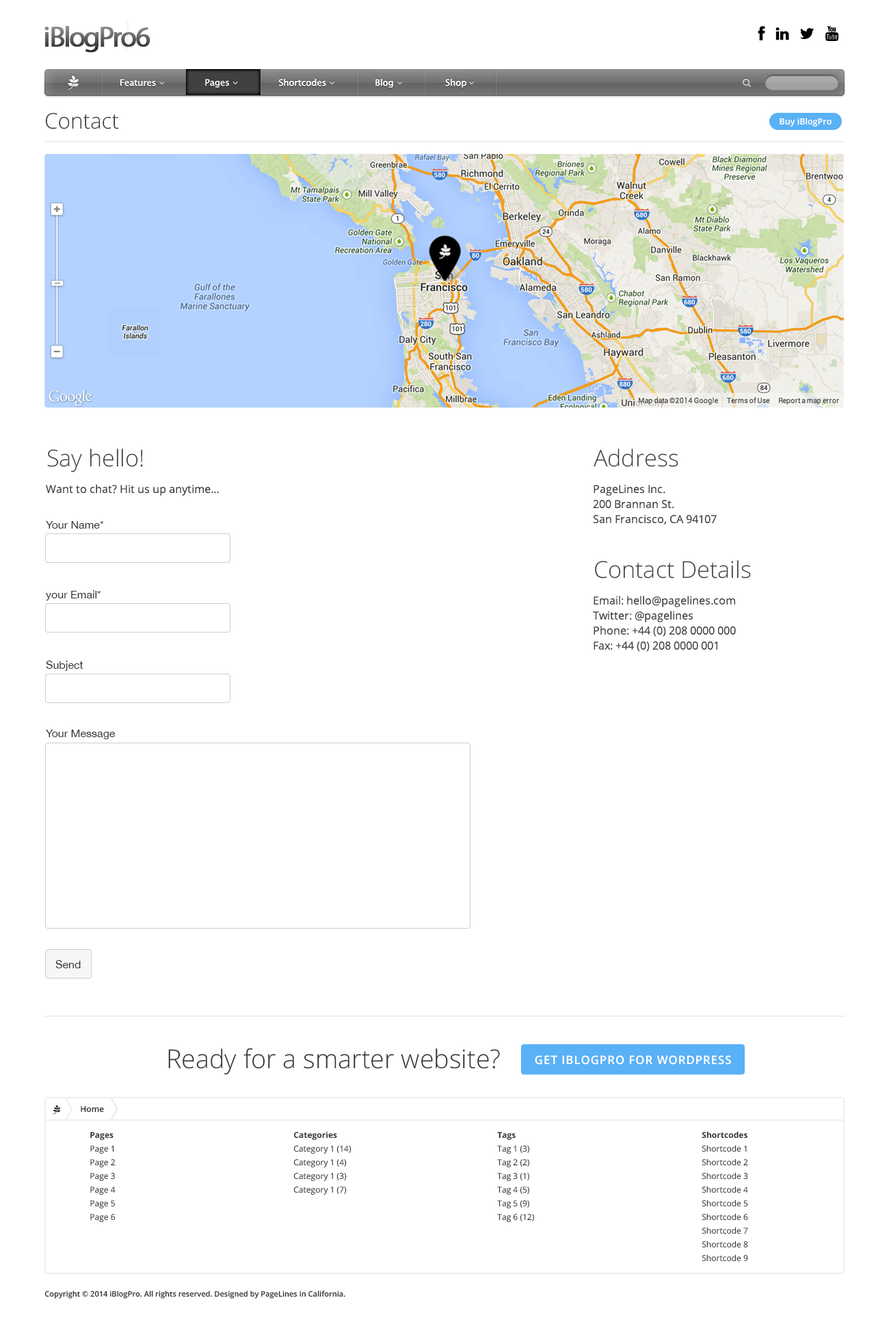
<style>
.page{position:relative;width:889px;height:1341px;background:#ffffff}
.page>*{position:absolute;margin:0}
.t1{font:28.7px "MyriadPro-Regular";letter-spacing:-0.065em;font-weight:bold}
.t2{font:8.9px "LucidaSansUnicode";color:#ffffff}
.t3{font:21.5px "OpenSans-Light";color:#333333}
.t4{font:8.6px "OpenSans-Semibold";color:#ffffff}
.t5{font:23.3px "OpenSans-Light";color:#414141}
.t6{font:10.9px "OpenSans";color:#414141}
.t7{font:10.9px/15px "OpenSans";color:#414141}
.t8{font:10.9px "HelveticaNeue";color:#333333}
.t9{font:26px "OpenSans-Light";color:#333333}
.t10{font:11.6px "OpenSans-Semibold";letter-spacing:0.06em;color:#ffffff;text-transform:uppercase}
.t11{font:8.2px "OpenSans-Semibold";color:#333333}
.t12{font:8.2px/13.7px "OpenSans";color:#333333}
.t13{font:8.2px/13.7px "OpenSans-Bold";color:#333333}
.t14{font:7.5px "OpenSans-Semibold";color:#333333}
</style>
<div class="page">
<p class="t1" style="left:44px;top:26px;width:106px;height:27px">iBlogPro6</p>
<p class="t2" style="left:120px;top:79px;width:346px;height:9px">Features         Pages         Shortcodes                Blog             Shop</p>
<p class="t2" style="left:120px;top:79px;width:346px;height:9px">Features         Pages         Shortcodes                Blog             Shop</p>
<p class="t2" style="left:205px;top:79px;width:24px;height:9px">Pages</p>
<p class="t3" style="left:45px;top:113px;width:74px;height:16px">Contact</p>
<p class="t4" style="left:780px;top:118px;width:52px;height:9px">Buy iBlogPro</p>
<p class="t5" style="left:47px;top:449px;width:96px;height:24px">Say hello!</p>
<p class="t5" style="left:594px;top:449px;width:84px;height:18px">Address</p>
<p class="t6" style="left:46px;top:484px;width:173px;height:12px">Want to chat? Hit us up anytime…</p>
<p class="t7" style="left:593px;top:485px;width:124px;height:40px">PageLines Inc.<br>200 Brannan St.<br>San Francisco, CA 94107</p>
<p class="t8" style="left:46px;top:521px;width:58px;height:8px">Your Name*</p>
<p class="t5" style="left:595px;top:560px;width:156px;height:19px">Contact Details</p>
<p class="t8" style="left:46px;top:590px;width:55px;height:10px">your Email*</p>
<p class="t7" style="left:593px;top:596px;width:143px;height:56px">Email: hello@pagelines.com<br>Twitter: @pagelines<br>Phone: +44 (0) 208 0000 000<br>Fax: +44 (0) 208 0000 001</p>
<p class="t8" style="left:46px;top:661px;width:37px;height:10px">Subject</p>
<p class="t8" style="left:46px;top:730px;width:69px;height:9px">Your Message</p>
<p class="t8" style="left:55px;top:960px;width:26px;height:8px">Send</p>
<p class="t9" style="left:168px;top:1048px;width:332px;height:27px">Ready for a smarter website?</p>
<p class="t10" style="left:535px;top:1055px;width:196px;height:10px">Get iBlogPro for WordPress</p>
<p class="t11" style="left:81px;top:1106px;width:23px;height:7px">Home</p>
<p class="t12" style="left:90px;top:1132px;width:26px;height:91px"><span class="t13">Pages<br></span>Page 1<br>Page 2<br>Page 3<br>Page 4<br>Page 5<br>Page 6</p>
<p class="t12" style="left:293px;top:1132px;width:59px;height:63px"><span class="t13">Categories<br></span>Category 1 (14)<br>Category 1 (4)<br>Category 1 (3)<br>Category 1 (7)</p>
<p class="t12" style="left:497px;top:1132px;width:37px;height:91px"><span class="t13">Tags<br></span>Tag 1 (3)<br>Tag 2 (2)<br>Tag 3 (1)<br>Tag 4 (5)<br>Tag 5 (9)<br>Tag 6 (12)</p>
<p class="t12" style="left:702px;top:1131px;width:46px;height:131px"><span class="t13">Shortcodes<br></span>Shortcode 1<br>Shortcode 2<br>Shortcode 3<br>Shortcode 4<br>Shortcode 5<br>Shortcode 6<br>Shortcode 7<br>Shortcode 8<br>Shortcode 9</p>
<p class="t14" style="left:44px;top:1291px;width:301px;height:8px">Copyright © 2014 iBlogPro. All rights reserved. Designed by PageLines in California.</p>
</div>
